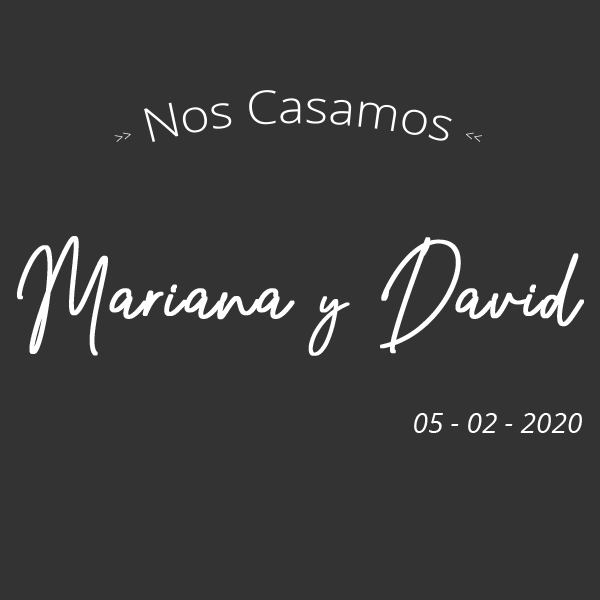
<style>
.page{position:relative;width:600px;height:600px;background:#333333}
.page>*{position:absolute;margin:0}
.t1{font:48px "OpenSans-Light";color:#ffffff}
.t2{font:24px "OpenSans-Light";color:#ffffff}
.t3{font:72px "GrayscaleSignatureRegular";color:#ffffff;font-weight:bold}
.t4{font:60px "GrayscaleSignatureRegular";color:#ffffff;font-weight:bold}
.t5{font:48px "OpenSans-Italic";color:#ffffff}
</style>
<div class="page">
<p class="t1" style="left:114px;top:90px;width:369px;height:52px"><span class="t2">&gt;&gt;</span> Nos Casamos <span class="t2">&lt;&lt;</span></p>
<p class="t3" style="left:17px;top:236px;width:567px;height:120px">Mariana <span class="t4">y</span> David</p>
<p class="t5" style="left:414px;top:413px;width:168px;height:20px">05 - 02 - 2020</p>
</div>
